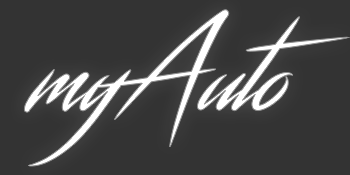
<style>
.page{position:relative;width:350px;height:175px;background:#333333}
.page>*{position:absolute;margin:0}
.t1{font:105px "Streamster";color:#ffffff}
</style>
<div class="page">
<p class="t1" style="left:24px;top:9px;width:326px;height:157px">myAuto</p>
</div>
